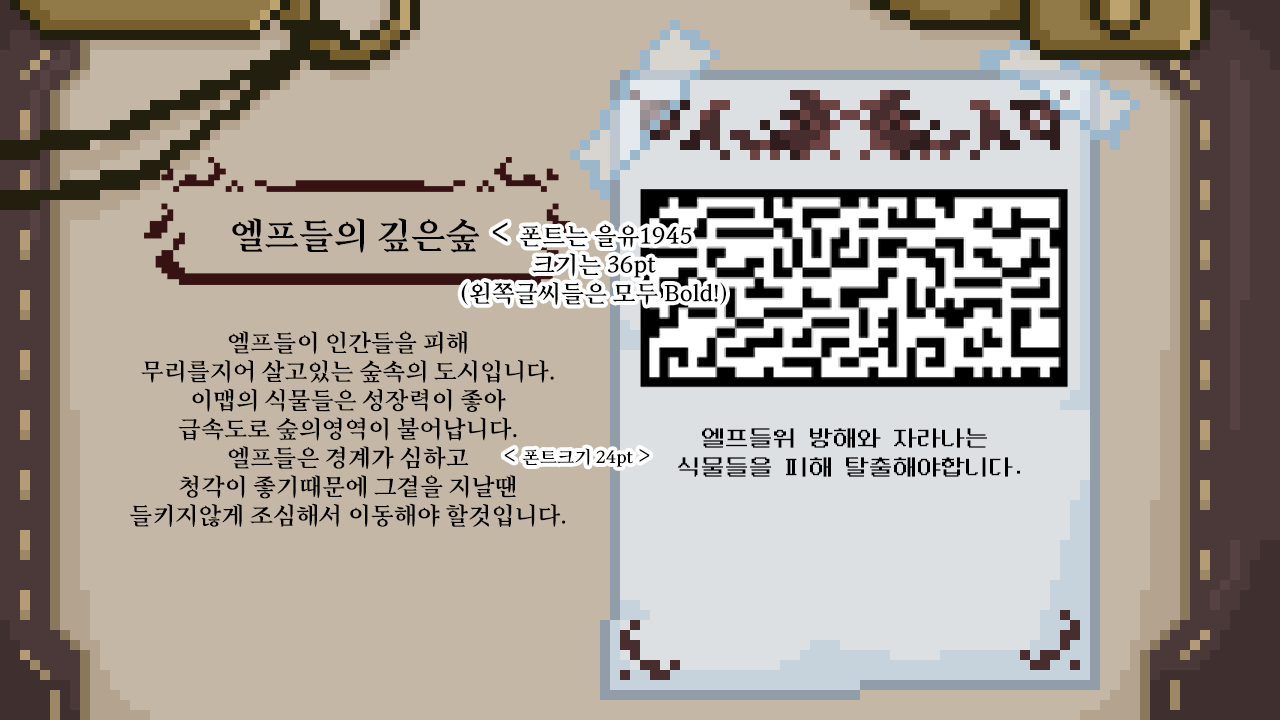
<style>
.page{position:relative;width:1280px;height:720px;background:#c5b7a5}
.page>*{position:absolute;margin:0}
.t1{font:36px "Eulyoo1945-SemiBold";color:#020202}
.t2{font:24px "Eulyoo1945-SemiBold";color:#020202}
.t3{font:24px "Eulyoo1945-SemiBold";color:#000000}
.t4{font:24px "NeoDunggeunmo-Regular";color:#000000}
.t5{font:18px "Eulyoo1945-SemiBold";color:#020202}
</style>
<div class="page">
<p class="t1" style="left:232px;top:218px;width:248px;height:35px">엘프들의 깊은숲</p>
<p class="t2" style="left:461px;top:222px;width:265px;height:83px;text-align:center"><span class="t1">&lt; </span>폰트는 을유1945 <br>크기는 36pt<br>(왼쪽글씨들은 모두 Bold!)</p>
<p class="t3" style="left:129px;top:331px;width:437px;height:196px;text-align:center">엘프들이 인간들을 피해<br>무리를지어 살고있는 숲속의 도시입니다.<br>이맵의 식물들은 성장력이 좋아<br>급속도로 숲의영역이 불어납니다.<br>엘프들은 경계가 심하고<br>청각이 좋기때문에 그곁을 지날땐<br>들키지않게 조심해서 이동해야 할것입니다.</p>
<p class="t4" style="left:678px;top:428px;width:342px;height:49px;text-align:center">엘프들위 방해와 자라나는 <br>식물들을 피해 탈출해야합니다.</p>
<p class="t5" style="left:504px;top:448px;width:146px;height:19px"><span class="t2">&lt; </span>폰트크기 24pt <span class="t2">&gt;</span></p>
</div>
